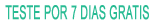
<style>
.page{position:relative;width:156px;height:25px;background:#ffffff}
.page>*{position:absolute;margin:0}
.t1{font:19.3px "ArialMT";color:#28bb93;font-weight:bold;scale:0.55 1}
</style>
<div class="page">
<p class="t1" style="left:5px;top:5px;width:144px;height:15px">TESTE POR 7 DIAS GRATIS</p>
</div>
